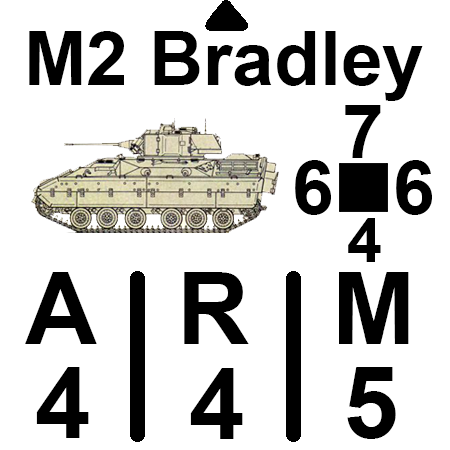
<style>
.page{position:relative;width:450px;height:450px;background:#ffffff}
.page>*{position:absolute;margin:0}
.t1{font:75px "Arial-BoldMT";color:#000000}
.t2{font:62.5px "Arial-BoldMT";color:#000000}
.t3{font:100px "Arial-BoldMT";color:#000000}
</style>
<div class="page">
<p class="t1" style="left:29px;top:31px;width:394px;height:70px">M2 Bradley</p>
<p class="t1" style="left:345px;top:105px;width:36px;height:53px">7</p>
<p class="t1" style="left:295px;top:160px;width:36px;height:55px">6</p>
<p class="t1" style="left:396px;top:160px;width:36px;height:55px">6</p>
<p class="t2" style="left:348px;top:218px;width:33px;height:44px">4</p>
<p class="t3" style="left:25px;top:272px;width:384px;height:72px">A   R   M</p>
<p class="t3" style="left:36px;top:367px;width:53px;height:71px">4</p>
<p class="t3" style="left:190px;top:368px;width:53px;height:71px">4</p>
<p class="t3" style="left:347px;top:367px;width:49px;height:72px">5</p>
</div>
